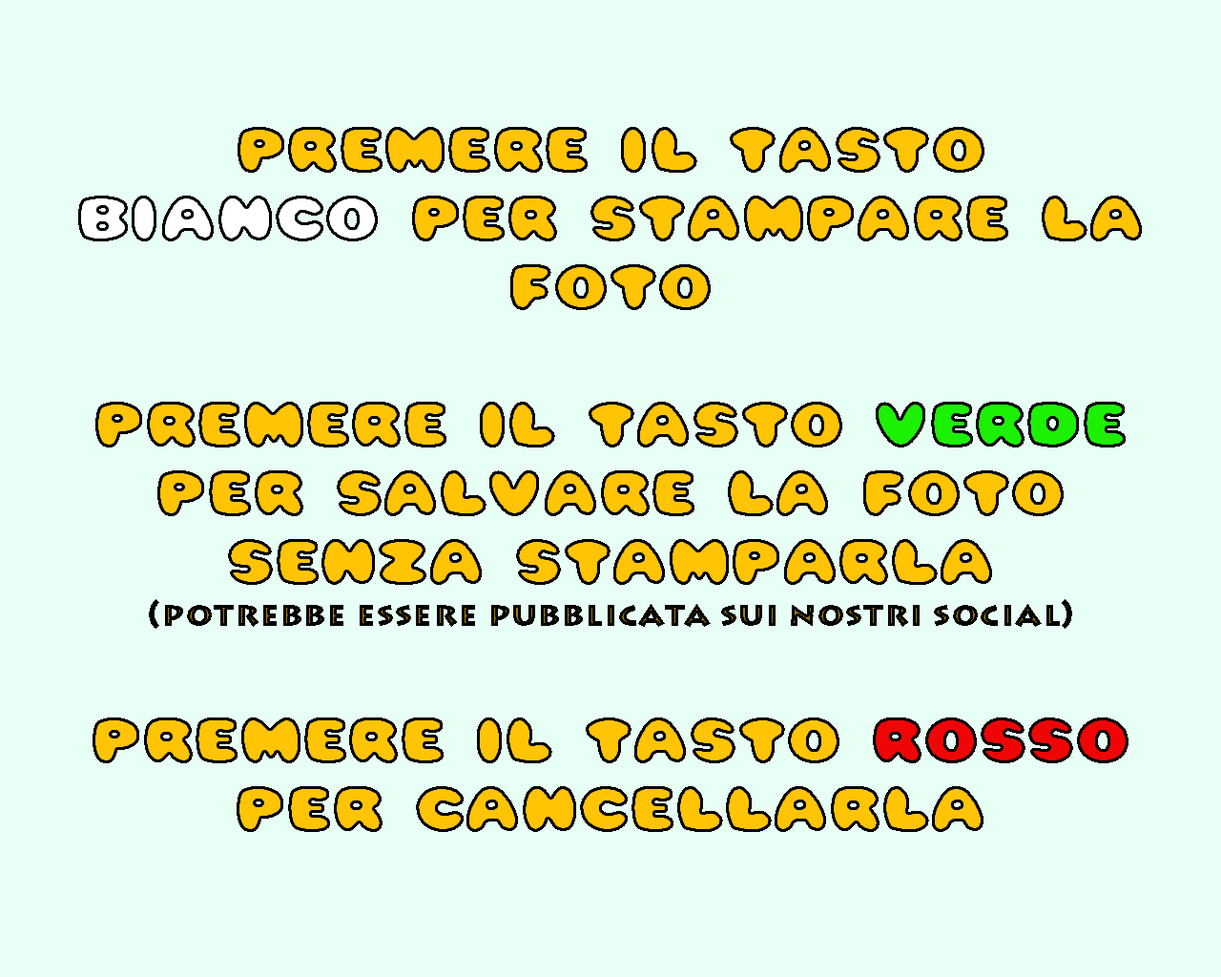
<style>
.page{position:relative;width:1221px;height:977px;background:#e7fff4}
.page>*{position:absolute;margin:0}
.t1{font:34.3px "LithosPro-Black";letter-spacing:0.025em;color:#a37e03}
.t2{font:57.2px "Pleasantly-Plump";letter-spacing:0.025em;color:#ffc403}
.t3{font:57.2px "Pleasantly-Plump";letter-spacing:0.025em;color:#ffffff}
.t4{font:57.2px "Pleasantly-Plump";letter-spacing:0.025em;color:#1cf005}
.t5{font:57.2px "Pleasantly-Plump";letter-spacing:0.025em;color:#ef0505}
</style>
<div class="page">
<p class="t1" style="left:78px;top:127px;width:1064px;height:705px;text-align:center"><span class="t2">premere il tasto </span><span class="t3">bianco </span><span class="t2">per stampare la foto<br><br>premere il tasto</span><span class="t4"> verde </span><span class="t2">per salvare la foto senza stamparla <br></span>(potrebbe essere pubblicata sui nostri social)<br><br><span class="t2">premere il tasto </span><span class="t5">rosso </span><span class="t2">per cancellarla</span></p>
</div>
